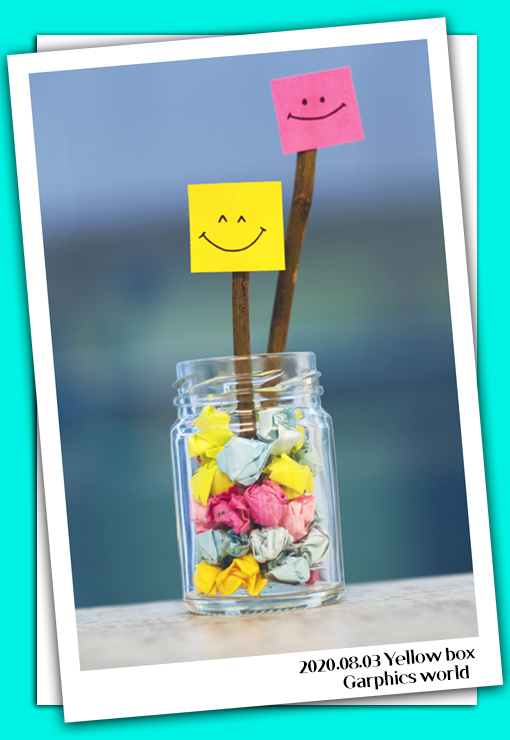
<style>
.page{position:relative;width:510px;height:740px}
.page>*{position:absolute;margin:0}
.t1{font:16px "HSBomBaram2.0";letter-spacing:-0.06em;color:#000000}
</style>
<div class="page">
<p class="t1" style="left:299px;top:647px;width:177px;height:43px;text-align:center;rotate:-5deg">2020.08.03 Yellow box<br>                          Garphics world</p>
</div>
